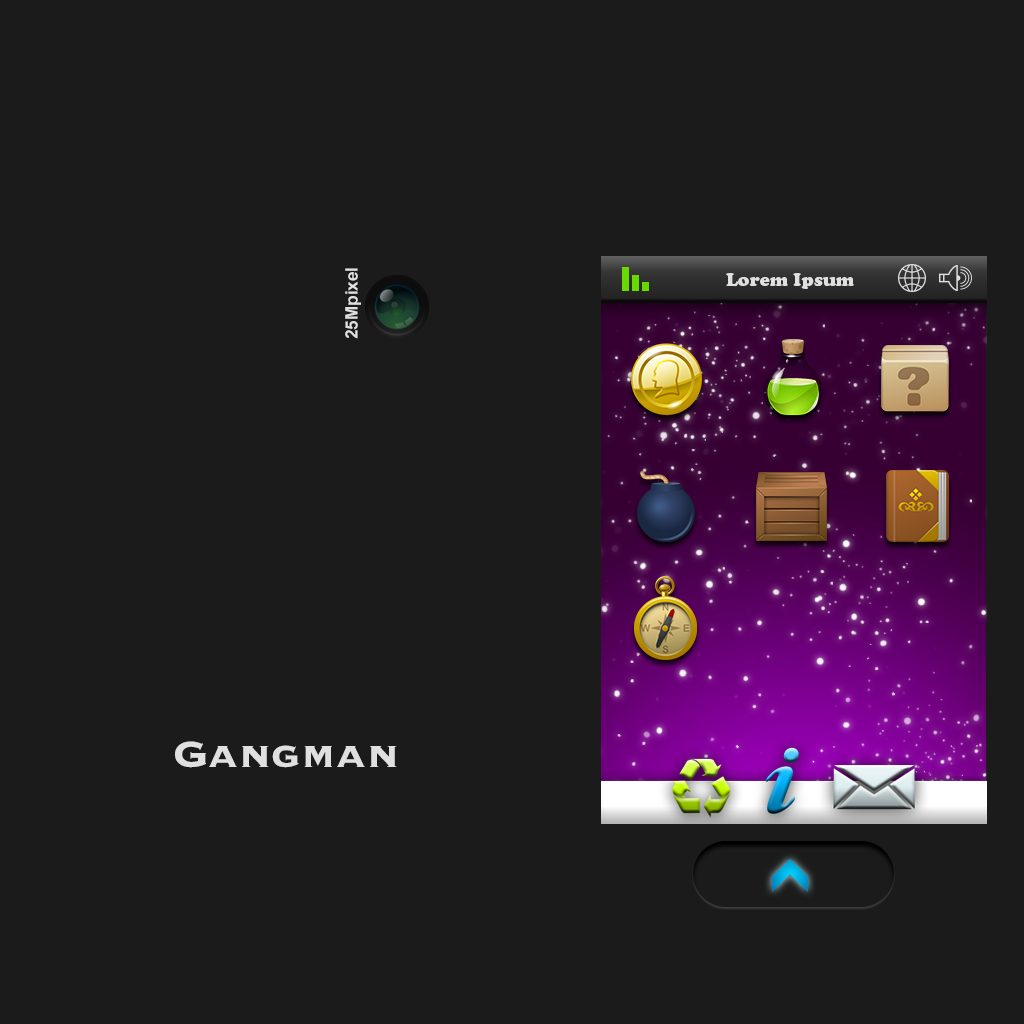
<style>
.page{position:relative;width:1024px;height:1024px;background:#1b1b1b}
.page>*{position:absolute;margin:0}
.t1{font:17px "Arial-BoldMT";color:#e0e0e0}
.t2{font:48px "Copperplate-Bold";color:#e0e0e0}
</style>
<div class="page">
<p class="t1" style="left:345px;top:268px;width:16px;height:71px;rotate:-90deg">25Mpixel</p>
<p class="t2" style="left:175px;top:741px;width:222px;height:27px">Gangman</p>
</div>
